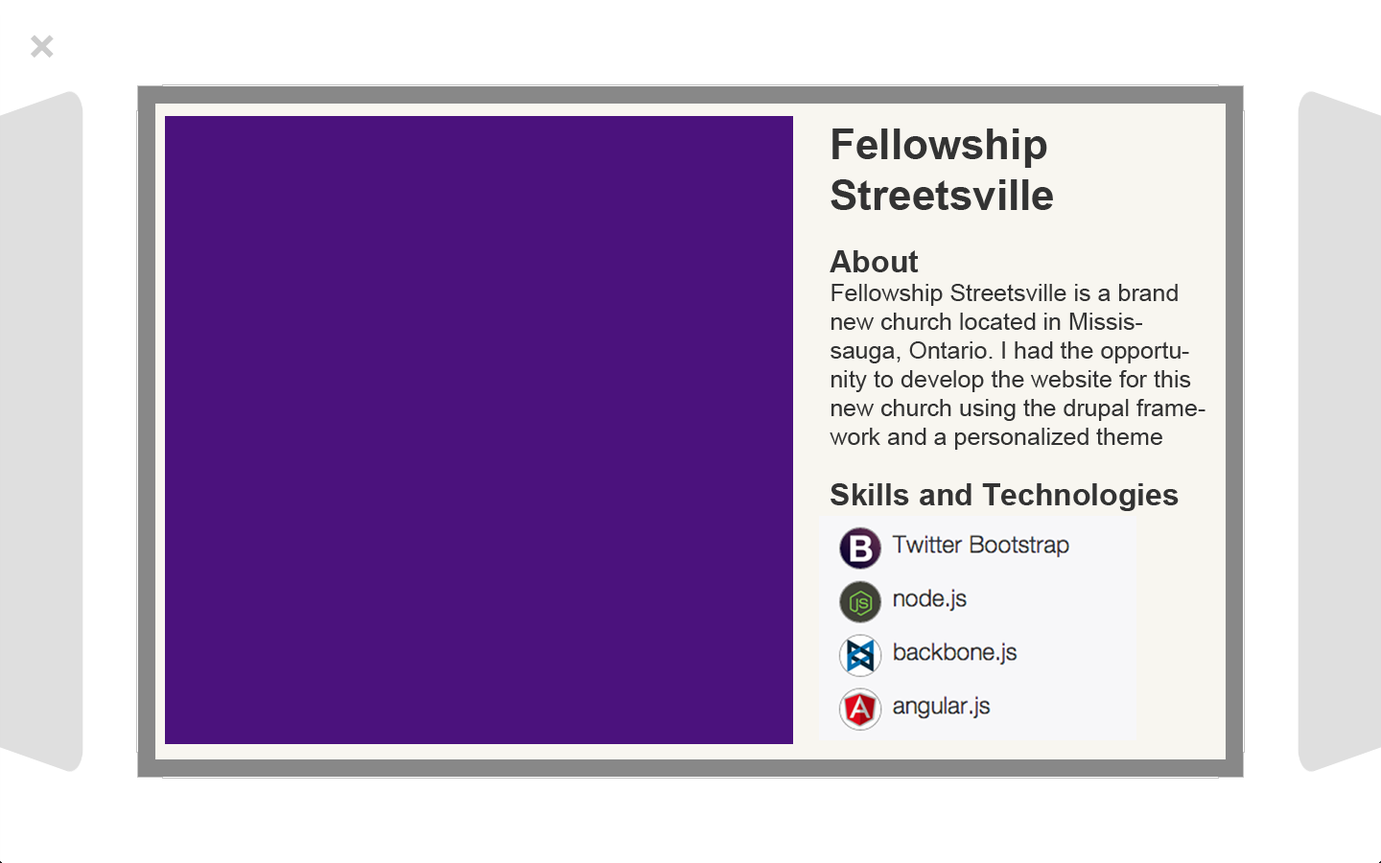
<style>
.page{position:relative;width:1381px;height:863px;background:#4b127d}
.page>*{position:absolute;margin:0}
.t1{font:42.2px "Arial-BoldMT";color:#333333}
.t2{font:24px "ArialMT";color:#333333}
.t3{font:30.7px "Arial-BoldMT";color:#333333}
</style>
<div class="page">
<p class="t1" style="left:831px;top:129px;width:222px;height:81px">Fellowship<br>Streetsville</p>
<p class="t2" style="left:830px;top:250px;width:376px;height:200px"><span class="t3">About<br></span>Fellowship Streetsville is a brand new church located in Mississauga, Ontario. I had the opportunity to develop the website for this new church using the drupal framework and a personalized theme</p>
<p class="t3" style="left:831px;top:483px;width:348px;height:28px">Skills and Technologies</p>
</div>
